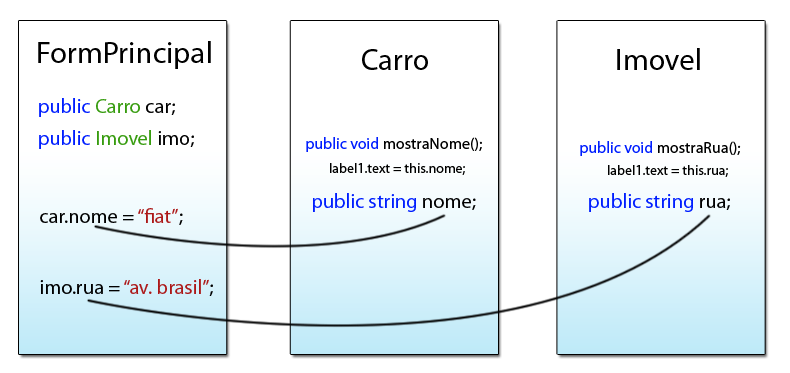
<style>
.page{position:relative;width:790px;height:373px;background:#ffffff}
.page>*{position:absolute;margin:0}
.t1{font:30.6px "MyriadPro-Regular";color:#000000}
.t2{font:20.4px "MyriadPro-Regular";color:#001eff}
.t3{font:20.4px "MyriadPro-Regular";color:#379c0f}
.t4{font:20.4px "MyriadPro-Regular";color:#000000}
.t5{font:16px "MyriadPro-Regular";color:#000000}
.t6{font:16px "MyriadPro-Regular";color:#001eff}
.t7{font:14px "MyriadPro-Regular";color:#000000}
.t8{font:20.4px "MyriadPro-Regular";color:#ac1818}
</style>
<div class="page">
<p class="t1" style="left:38px;top:41px;width:173px;height:28px">FormPrincipal</p>
<p class="t1" style="left:362px;top:49px;width:66px;height:21px">Carro</p>
<p class="t1" style="left:617px;top:48px;width:83px;height:22px">Imovel</p>
<p class="t2" style="left:39px;top:98px;width:136px;height:19px">public<span class="t3"> Carro </span><span class="t4">car;</span></p>
<p class="t2" style="left:39px;top:130px;width:155px;height:19px">public<span class="t3"> Imovel </span><span class="t4">imo;</span></p>
<p class="t5" style="left:306px;top:137px;width:176px;height:15px"><span class="t6">public void </span>mostraNome();</p>
<p class="t5" style="left:580px;top:141px;width:161px;height:15px"><span class="t6">public void </span>mostraRua();</p>
<p class="t7" style="left:330px;top:163px;width:135px;height:12px">label1.text = this.nome;</p>
<p class="t7" style="left:608px;top:165px;width:120px;height:12px">label1.text = this.rua;</p>
<p class="t2" style="left:313px;top:193px;width:163px;height:19px">public string <span class="t4">nome;</span></p>
<p class="t2" style="left:589px;top:193px;width:141px;height:19px">public string <span class="t4">rua;</span></p>
<p class="t4" style="left:40px;top:208px;width:143px;height:17px">car.nome = <span class="t8">“fiat”</span>;</p>
<p class="t8" style="left:40px;top:279px;width:173px;height:17px"><span class="t4">imo.rua = </span>“av. brasil”<span class="t4">;</span></p>
</div>
